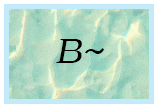
<style>
.page{position:relative;width:158px;height:108px}
.page>*{position:absolute;margin:0}
.t1{font:33.3px "Superclarendon-LightItalic";color:#000000}
</style>
<div class="page">
<p class="t1" style="left:56px;top:39px;width:48px;height:24px">B~</p>
</div>
